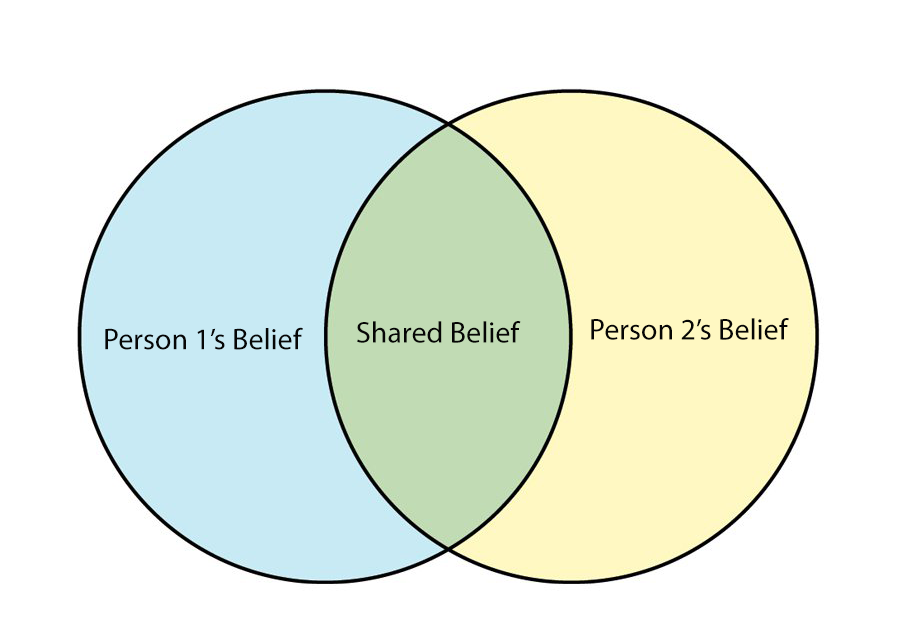
<style>
.page{position:relative;width:900px;height:632px;background:#ffffff}
.page>*{position:absolute;margin:0}
.t1{font:30px "MyriadPro-Regular";color:#060606}
</style>
<div class="page">
<p class="t1" style="left:591px;top:318px;width:198px;height:22px">Person 2’s Belief</p>
<p class="t1" style="left:105px;top:327px;width:198px;height:23px">Person 1’s Belief</p>
<p class="t1" style="left:357px;top:321px;width:164px;height:22px">Shared Belief</p>
</div>
